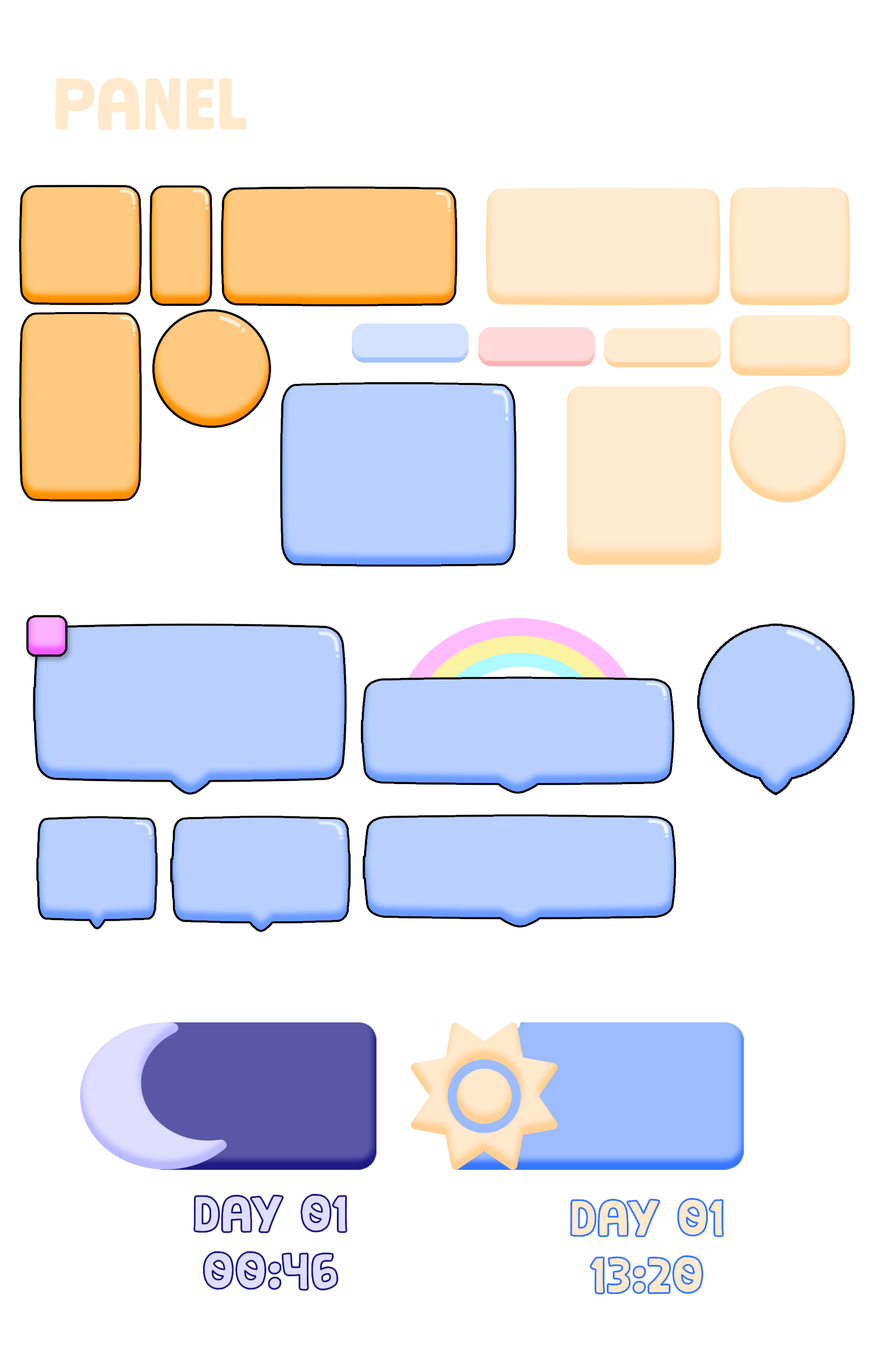
<style>
.page{position:relative;width:874px;height:1365px;background:#ffffff}
.page>*{position:absolute;margin:0}
.t1{font:68.2px "Toasty-Milk";color:#ffe9cd}
.t2{font:47.7px "Toasty-Milk";color:#ffe9cd}
</style>
<div class="page">
<p class="t1" style="left:55px;top:77px;width:192px;height:53px">PANEL</p>
<p class="t2" style="left:571px;top:1198px;width:152px;height:96px;text-align:center">DAY 01<br>13:20</p>
</div>
